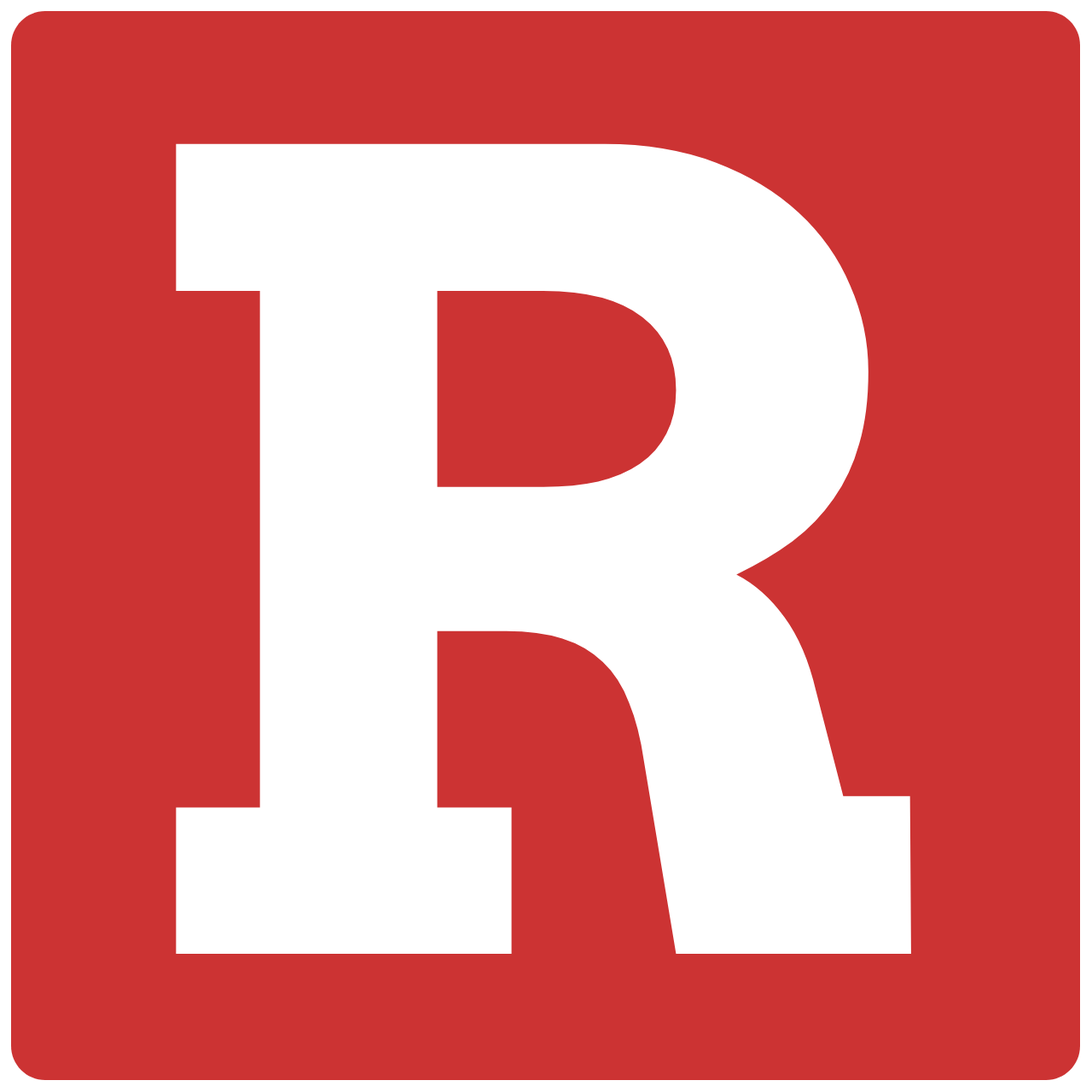
<style>
.page{position:relative;width:1092px;height:1092px;background:#cc3333}
.page>*{position:absolute;margin:0}
.t1{font:1094px "Arvo-Bold";color:#ffffff}
</style>
<div class="page">
<p class="t1" style="left:176px;top:143px;width:735px;height:811px">R</p>
</div>
